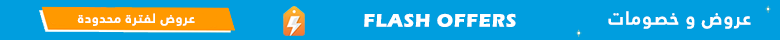
<style>
.page{position:relative;width:780px;height:40px;background:#009edf}
.page>*{position:absolute;margin:0}
.t1{font:13px "JannaLT-Bold";letter-spacing:0.05em;color:#fefefe}
.t2{font:18.7px "ErasITC-Bold";letter-spacing:0.05em;color:#ffffff}
.t3{font:18.7px "JannaLT-Bold";letter-spacing:0.05em;color:#ffffff}
</style>
<div class="page">
<p class="t1" style="left:77px;top:13px;width:118px;height:13px">ﺓﺩﻭﺪﺤﻣ ﺓﺮﺘﻔﻟ ﺽﻭﺮﻋ</p>
<p class="t2" style="left:364px;top:13px;width:152px;height:14px">FLASH OFFERS</p>
<p class="t3" style="left:608px;top:11px;width:143px;height:18px">ﺕﺎﻣﻮﺼﺧ ﻭ ﺽﻭﺮﻋ</p>
</div>
